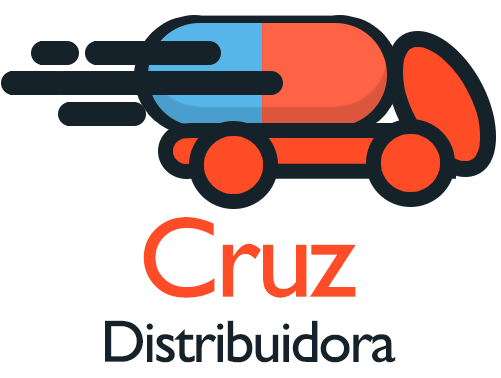
<style>
.page{position:relative;width:501px;height:378px;background:#ffffff}
.page>*{position:absolute;margin:0}
.t1{font:115px "GillSans";letter-spacing:-0.04em;color:#fe4c26}
.t2{font:60px "GillSans";letter-spacing:-0.04em;color:#15222a}
</style>
<div class="page">
<p class="t1" style="left:143px;top:217px;width:213px;height:81px">Cruz</p>
<p class="t2" style="left:105px;top:320px;width:291px;height:43px">Distribuidora</p>
</div>
